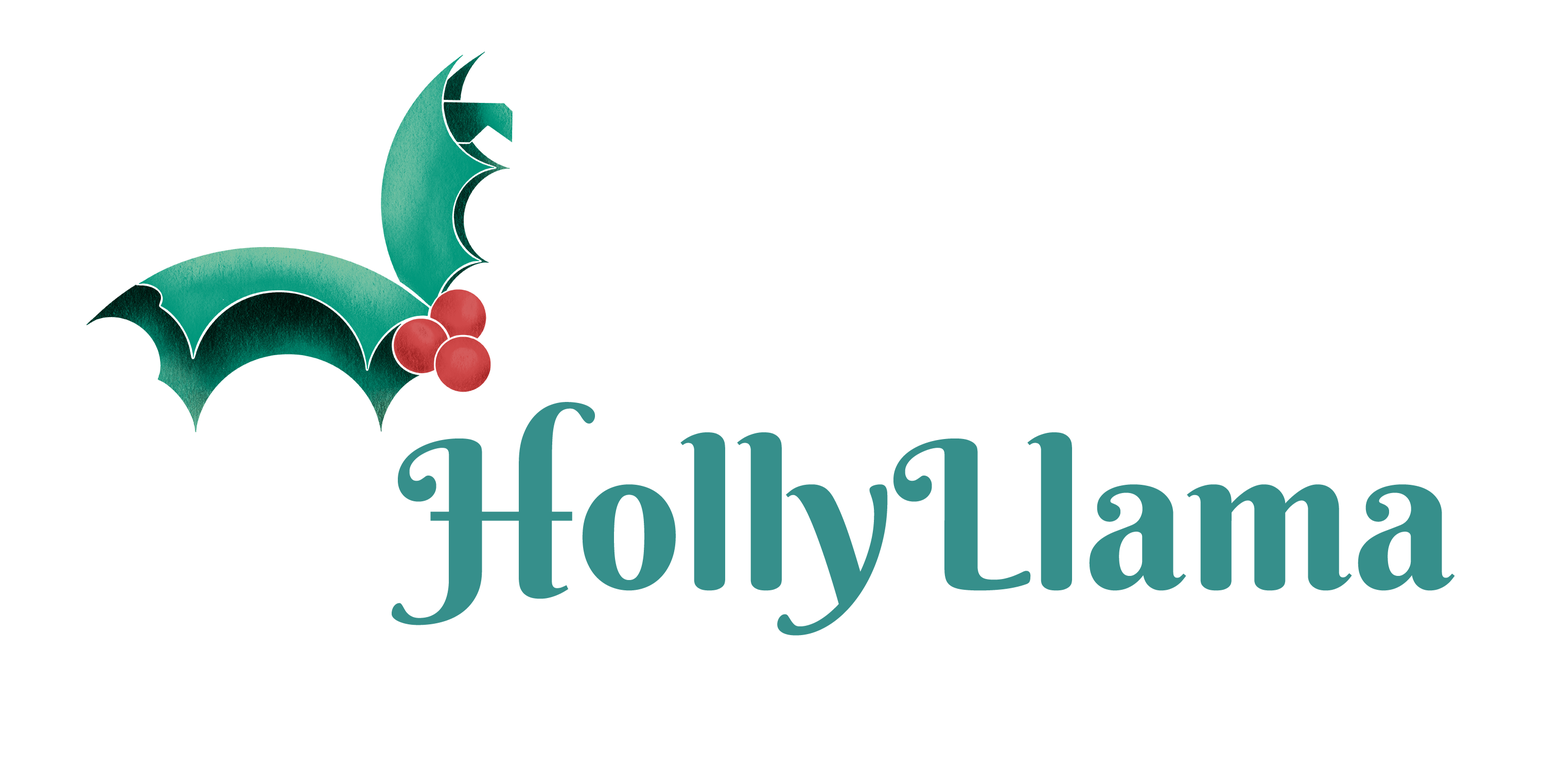
<style>
.page{position:relative;width:1544px;height:772px;background:#ffffff}
.page>*{position:absolute;margin:0}
.t1{font:205.9px "BerkshireSwash-Regular";color:#368f8b}
</style>
<div class="page">
<p class="t1" style="left:392px;top:402px;width:1063px;height:234px">HollyLlama</p>
</div>
